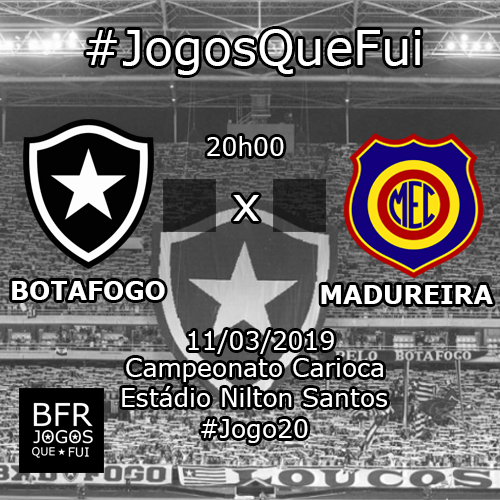
<style>
.page{position:relative;width:500px;height:500px}
.page>*{position:absolute;margin:0}
.t1{font:48px "Verdana";color:#ffffff}
.t2{font:25px "Verdana";color:#ffffff}
.t3{font:25px "Verdana-Bold";color:#ffffff}
</style>
<div class="page">
<p class="t1" style="left:86px;top:29px;width:335px;height:46px">#JogosQueFui</p>
<p class="t2" style="left:207px;top:136px;width:77px;height:20px">20h00</p>
<p class="t1" style="left:233px;top:195px;width:26px;height:26px">x</p>
<p class="t3" style="left:12px;top:281px;width:153px;height:19px">BOTAFOGO</p>
<p class="t3" style="left:321px;top:285px;width:172px;height:19px">MADUREIRA</p>
<p class="t2" style="left:188px;top:330px;width:146px;height:24px">11/03/2019</p>
<p class="t2" style="left:126px;top:358px;width:257px;height:24px">Campeonato Carioca</p>
<p class="t2" style="left:122px;top:386px;width:265px;height:21px">Estádio Nilton Santos</p>
<p class="t2" style="left:201px;top:419px;width:107px;height:24px">#Jogo20</p>
</div>
